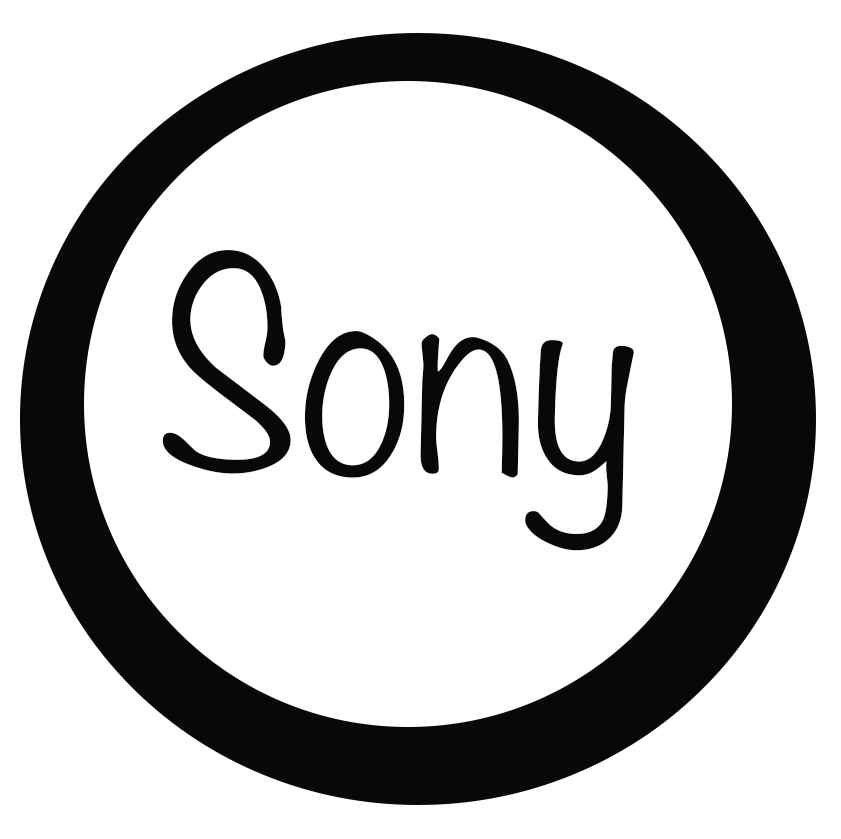
<style>
.page{position:relative;width:841px;height:839px;background:#ffffff}
.page>*{position:absolute;margin:0}
.t1{font:250px "Noteworthy-Light";color:#0a0707}
</style>
<div class="page">
<p class="t1" style="left:162px;top:250px;width:472px;height:301px;rotate:1deg">Sony</p>
</div>
